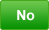
<style>
.page{position:relative;width:49px;height:30px}
.page>*{position:absolute;margin:0}
.t1{font:14px "Arial-BoldMT";color:#ffffff}
</style>
<div class="page">
<p class="t1" style="left:17px;top:10px;width:18px;height:11px">No</p>
</div>
